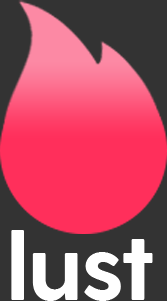
<style>
.page{position:relative;width:167px;height:301px;background:#333333}
.page>*{position:absolute;margin:0}
.t1{font:96.3px "GreycliffCF-Bold";color:#ffffff}
</style>
<div class="page">
<p class="t1" style="left:11px;top:230px;width:142px;height:71px">lust</p>
</div>
